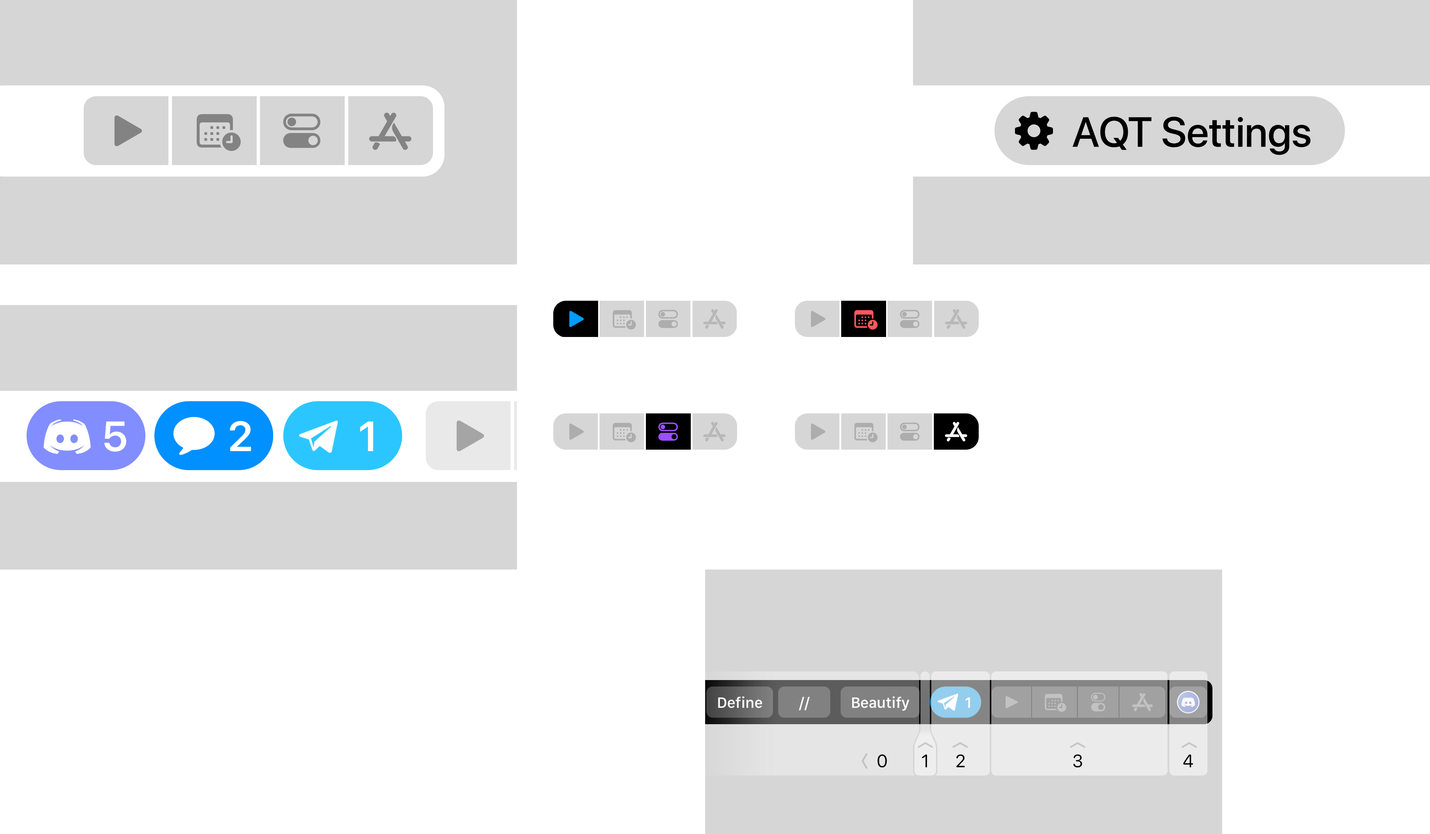
<style>
.page{position:relative;width:1430px;height:834px;background:#ffffff}
.page>*{position:absolute;margin:0}
.t1{font:37.2px "SFProRounded-Regular";color:#838383}
.t2{font:37.2px "SFProRounded-Regular";color:#000000}
.t3{font:42px "SFProDisplay-Medium";color:#000000}
.t4{font:19.6px "SFProRounded-Regular";color:#009cff}
.t5{font:19.6px "SFProRounded-Regular";color:#adadad}
.t6{font:19.6px "SFProRounded-Regular";color:#ff5a5a}
.t7{font:42px "SFPro-Semibold";color:#ffffff}
.t8{font:37.2px "SFProRounded-Regular";color:#ffffff}
.t9{font:37.2px "SFProRounded-Regular";color:#a5a5a5}
.t10{font:19.6px "SFProRounded-Regular";color:#9d4eff}
.t11{font:18.1px "SFProRounded-Regular";color:#c2c2c2}
.t12{font:17.9px "SFProRounded-Regular";color:#000000}
</style>
<div class="page">
<p class="t1" style="left:283px;top:113px;width:38px;height:35px">􀜊</p>
<p class="t2" style="left:1015px;top:112px;width:38px;height:38px">􀣌</p>
<p class="t1" style="left:114px;top:115px;width:28px;height:31px">􀊄</p>
<p class="t1" style="left:196px;top:114px;width:45px;height:37px">􀧞</p>
<p class="t3" style="left:1072px;top:117px;width:238px;height:38px">AQT Settings</p>
<p class="t4" style="left:569px;top:311px;width:15px;height:16px">􀊄</p>
<p class="t5" style="left:612px;top:310px;width:24px;height:20px">􀧞</p>
<p class="t5" style="left:658px;top:310px;width:20px;height:18px">􀜊</p>
<p class="t5" style="left:810px;top:311px;width:15px;height:16px">􀊄</p>
<p class="t6" style="left:854px;top:310px;width:24px;height:20px">􀧞</p>
<p class="t5" style="left:899px;top:310px;width:20px;height:18px">􀜊</p>
<p class="t7" style="left:104px;top:421px;width:22px;height:31px">5</p>
<p class="t8" style="left:173px;top:417px;width:42px;height:38px">􀌥</p>
<p class="t7" style="left:230px;top:421px;width:21px;height:31px">2</p>
<p class="t7" style="left:360px;top:421px;width:13px;height:31px">1</p>
<p class="t9" style="left:456px;top:420px;width:28px;height:32px">􀊄</p>
<p class="t5" style="left:569px;top:424px;width:15px;height:16px">􀊄</p>
<p class="t5" style="left:612px;top:423px;width:24px;height:20px">􀧞</p>
<p class="t10" style="left:658px;top:422px;width:20px;height:19px">􀜊</p>
<p class="t5" style="left:810px;top:424px;width:15px;height:16px">􀊄</p>
<p class="t5" style="left:854px;top:423px;width:24px;height:20px">􀧞</p>
<p class="t5" style="left:899px;top:422px;width:20px;height:19px">􀜊</p>
<p class="t11" style="left:1044px;top:694px;width:22px;height:18px">􀧞</p>
<p class="t12" style="left:877px;top:754px;width:10px;height:14px">0</p>
<p class="t12" style="left:922px;top:754px;width:5px;height:14px">1</p>
<p class="t12" style="left:956px;top:754px;width:9px;height:13px">2</p>
<p class="t12" style="left:1073px;top:754px;width:9px;height:14px">3</p>
<p class="t12" style="left:1183px;top:754px;width:10px;height:14px">4</p>
</div>
